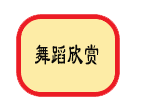
<style>
.page{position:relative;width:142px;height:108px;background:#ffffff}
.page>*{position:absolute;margin:0}
.t1{font:32px "LiSu";letter-spacing:0.02em;color:#0a0909;scale:0.5 1}
</style>
<div class="page">
<p class="t1" style="left:35px;top:44px;width:64px;height:21px">舞蹈欣赏</p>
</div>
